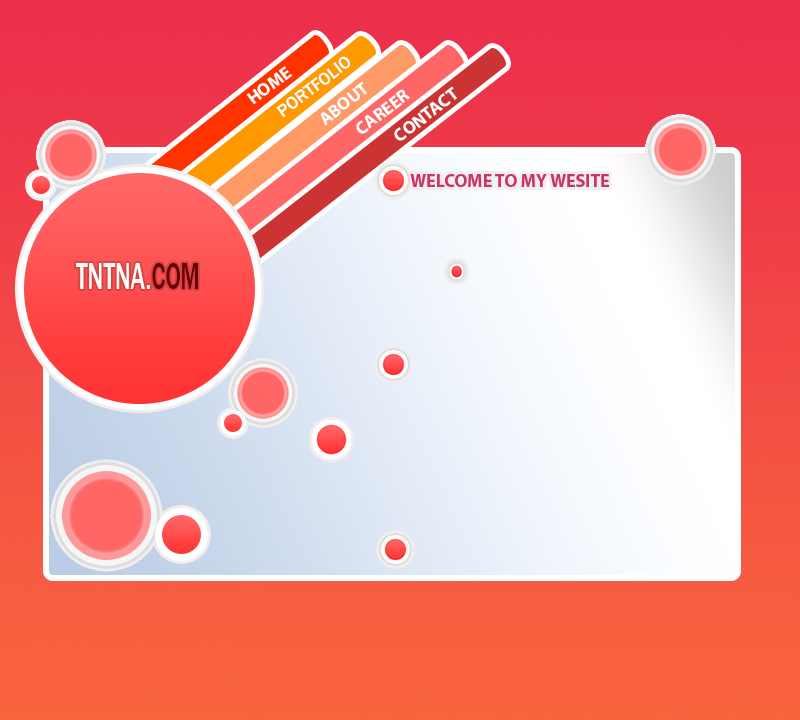
<style>
.page{position:relative;width:800px;height:720px}
.page>*{position:absolute;margin:0}
.t1{font:18px "FranklinGothic-Medium";color:#ffffff}
.t2{font:17.9px "MyriadPro-Bold";color:#ffffff}
.t3{font:18px "MyriadPro-Bold";color:#ffffff}
.t4{font:18px "MyriadPro-Bold";color:#cc3366}
.t5{font:39.3px "FranklinGothic-Medium";color:#ffffff;scale:0.61 1}
.t6{font:39.3px "FranklinGothic-Medium";color:#660000;scale:0.61 1}
</style>
<div class="page">
<p class="t1" style="left:276px;top:56px;width:75px;height:62px;rotate:-38deg">PORTFOLIO</p>
<p class="t2" style="left:246px;top:66px;width:47px;height:39px;rotate:-37deg">HOME</p>
<p class="t3" style="left:320px;top:81px;width:47px;height:45px;rotate:-38deg">ABOUT</p>
<p class="t3" style="left:356px;top:89px;width:55px;height:45px;rotate:-38deg">CAREER</p>
<p class="t3" style="left:394px;top:86px;width:63px;height:55px;rotate:-38deg">CONTACT</p>
<p class="t4" style="left:410px;top:174px;width:199px;height:13px">WELCOME TO MY WESITE</p>
<p class="t5" style="left:76px;top:263px;width:122px;height:26px">TNTNA.<span class="t6">COM</span></p>
</div>
